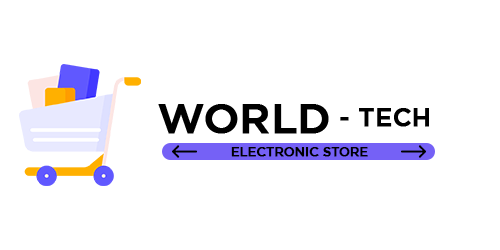
<style>
.page{position:relative;width:500px;height:250px;background:#ffffff}
.page>*{position:absolute;margin:0}
.t1{font:41.7px "Gotham-Medium";color:#000000;text-transform:uppercase;font-weight:bold}
.t2{font:25px "Gotham-Medium";color:#000000;text-transform:uppercase;font-weight:bold}
.t3{font:12.5px "Gotham-Medium";color:#000000;text-transform:uppercase;font-weight:bold}
</style>
<div class="page">
<p class="t1" style="left:158px;top:104px;width:171px;height:30px">world</p>
<p class="t2" style="left:340px;top:108px;width:89px;height:19px">- tech</p>
<p class="t3" style="left:231px;top:147px;width:137px;height:10px">electronic Store</p>
</div>
